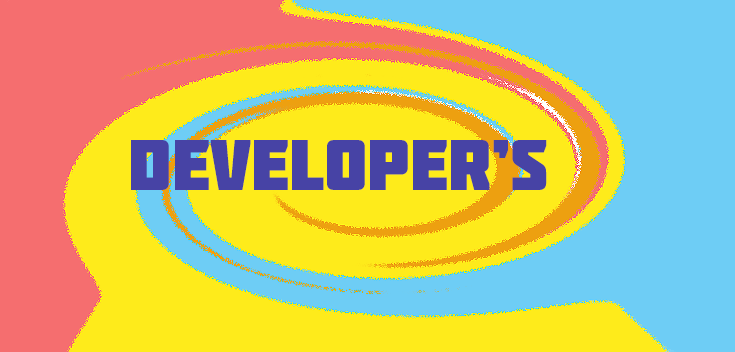
<style>
.page{position:relative;width:735px;height:352px;background:#feeb1b}
.page>*{position:absolute;margin:0}
.t1{font:72px "Molot";color:#4743a5}
</style>
<div class="page">
<p class="t1" style="left:131px;top:140px;width:416px;height:50px">Developer’s</p>
</div>
